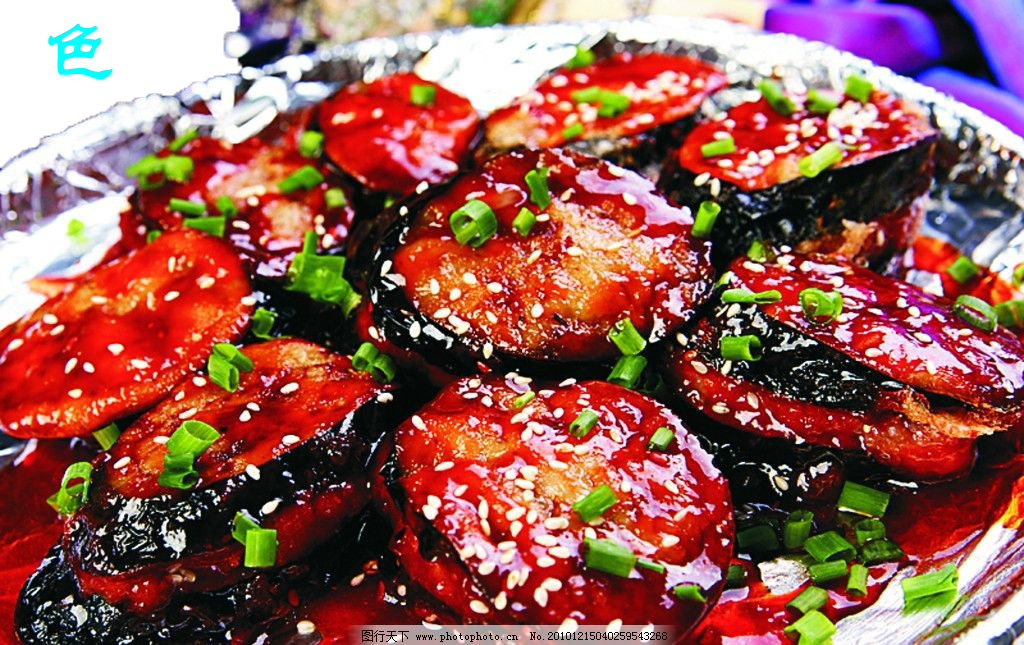
<style>
.page{position:relative;width:1024px;height:645px}
.page>*{position:absolute;margin:0}
.t1{font:72px "STLiti";color:#00ffff}
</style>
<div class="page">
<p class="t1" style="left:48px;top:23px;width:65px;height:57px">色</p>
</div>
